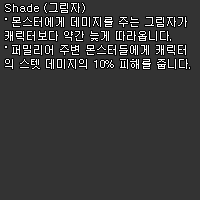
<style>
.page{position:relative;width:200px;height:200px;background:#333333}
.page>*{position:absolute;margin:0}
.t1{font:11px/14px "Dotum";color:#ffffff}
</style>
<div class="page">
<p class="t1" style="left:5px;top:3px;width:185px;height:66px">Shade (그림자)<br>˚ 몬스터에게 데미지를 주는 그림자가<br>캐릭터보다 약간 늦게 따라옵니다.<br>˚ 퍼밀리어 주변 몬스터들에게 캐릭터<br>의 스텟 데미지의 10% 피해를 줍니다.</p>
</div>
